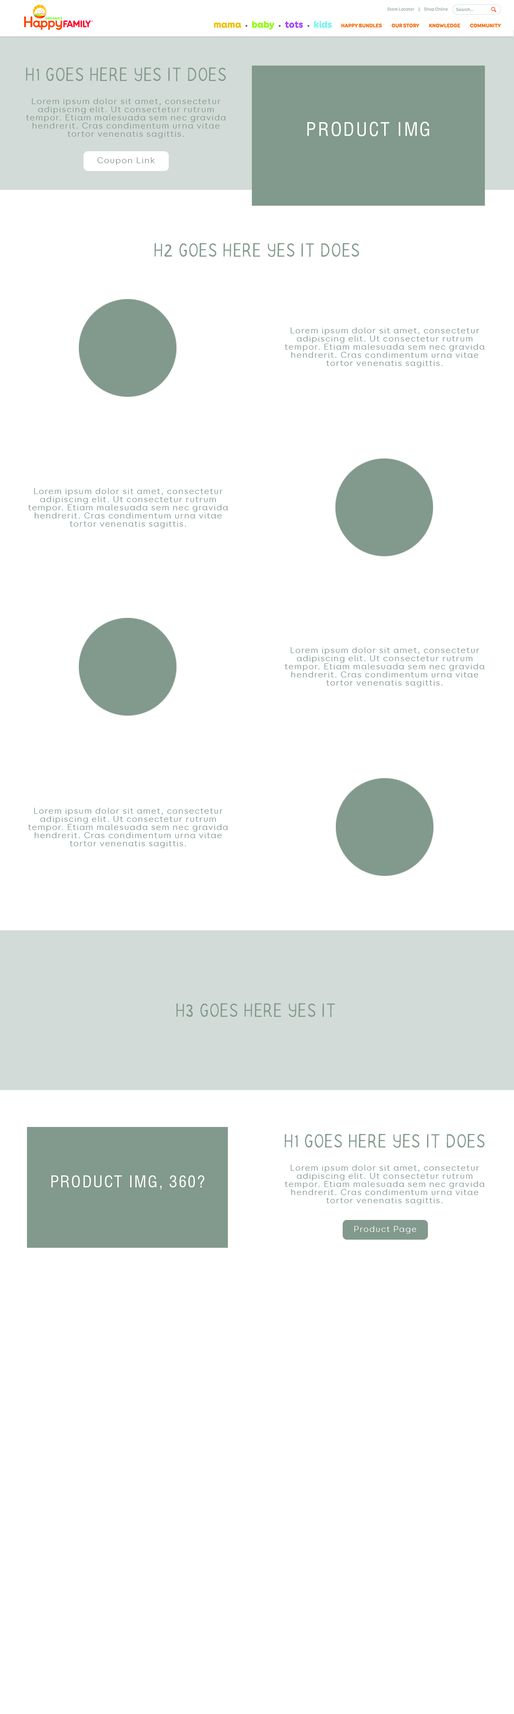
<style>
.page{position:relative;width:514px;height:1714px;background:#ffffff}
.page>*{position:absolute;margin:0}
.t1{font:18.4px "Organico-Regular";letter-spacing:0.08em;color:#82998d}
.t2{font:9px/8.1px "BoosterNextFY-Regular";letter-spacing:0.08em;color:#82998d}
.t3{font:18.4px "Helvetica-Condensed";letter-spacing:0.08em;color:#ffffff}
.t4{font:9px "BoosterNextFY-Regular";letter-spacing:0.08em;color:#82998d}
.t5{font:15.9px "Helvetica-Condensed";letter-spacing:0.08em;color:#ffffff}
.t6{font:9px "BoosterNextFY-Regular";letter-spacing:0.08em;color:#ffffff}
</style>
<div class="page">
<p class="t1" style="left:26px;top:67px;width:200px;height:14px">H1 GOES HERE YES IT DOES</p>
<p class="t2" style="left:26px;top:98px;width:200px;height:40px;text-align:center">Lorem ipsum dolor sit amet, consectetur adipiscing elit. Ut consectetur rutrum tempor. Etiam malesuada sem nec gravida hendrerit. Cras condimentum urna vitae tortor venenatis sagittis.</p>
<p class="t3" style="left:307px;top:122px;width:122px;height:14px">PRODUCT IMG</p>
<p class="t4" style="left:97px;top:157px;width:58px;height:8px">Coupon Link</p>
<p class="t1" style="left:154px;top:243px;width:205px;height:14px">H2 GOES HERE YES IT DOES</p>
<p class="t2" style="left:285px;top:327px;width:200px;height:41px;text-align:center">Lorem ipsum dolor sit amet, consectetur adipiscing elit. Ut consectetur rutrum tempor. Etiam malesuada sem nec gravida hendrerit. Cras condimentum urna vitae tortor venenatis sagittis.</p>
<p class="t2" style="left:28px;top:488px;width:200px;height:40px;text-align:center">Lorem ipsum dolor sit amet, consectetur adipiscing elit. Ut consectetur rutrum tempor. Etiam malesuada sem nec gravida hendrerit. Cras condimentum urna vitae tortor venenatis sagittis.</p>
<p class="t2" style="left:285px;top:647px;width:200px;height:40px;text-align:center">Lorem ipsum dolor sit amet, consectetur adipiscing elit. Ut consectetur rutrum tempor. Etiam malesuada sem nec gravida hendrerit. Cras condimentum urna vitae tortor venenatis sagittis.</p>
<p class="t2" style="left:28px;top:808px;width:200px;height:40px;text-align:center">Lorem ipsum dolor sit amet, consectetur adipiscing elit. Ut consectetur rutrum tempor. Etiam malesuada sem nec gravida hendrerit. Cras condimentum urna vitae tortor venenatis sagittis.</p>
<p class="t1" style="left:176px;top:1003px;width:160px;height:14px">H3 GOES HERE YES IT DOES</p>
<p class="t1" style="left:285px;top:1134px;width:200px;height:14px">H1 GOES HERE YES IT DOES</p>
<p class="t2" style="left:285px;top:1165px;width:200px;height:40px;text-align:center">Lorem ipsum dolor sit amet, consectetur adipiscing elit. Ut consectetur rutrum tempor. Etiam malesuada sem nec gravida hendrerit. Cras condimentum urna vitae tortor venenatis sagittis.</p>
<p class="t5" style="left:51px;top:1176px;width:153px;height:14px">PRODUCT IMG, 360?</p>
<p class="t6" style="left:354px;top:1226px;width:63px;height:8px">Product Page</p>
</div>
